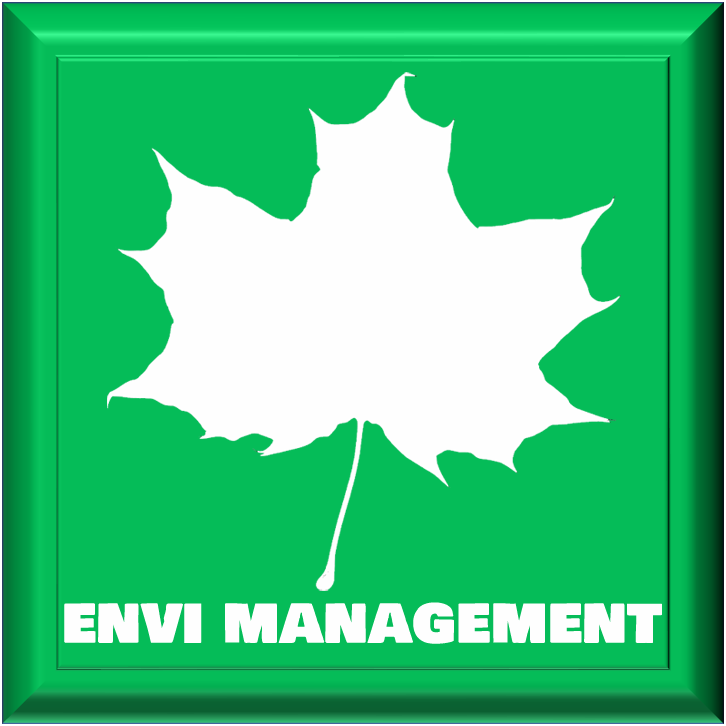
<style>
.page{position:relative;width:726px;height:726px;background:#05bc58}
.page>*{position:absolute;margin:0}
.t1{font:60px "BowlbyOneSC-Regular";color:#fefefe}
</style>
<div class="page">
<p class="t1" style="left:64px;top:602px;width:598px;height:42px">envi management</p>
</div>
